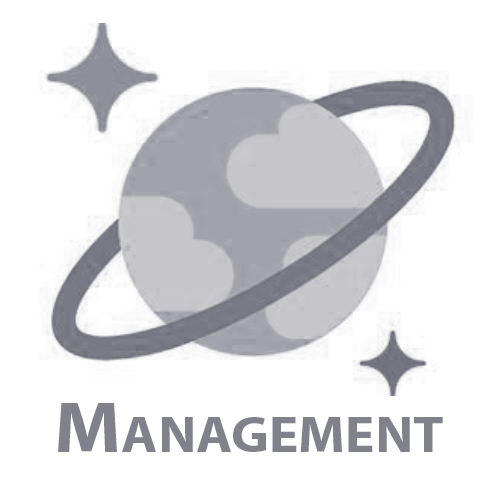
<style>
.page{position:relative;width:500px;height:500px;background:#ffffff}
.page>*{position:absolute;margin:0}
.t1{font:72px "MyriadPro-Bold";color:#81818c;font-variant:small-caps;scale:1.1 1}
</style>
<div class="page">
<p class="t1" style="left:58px;top:403px;width:385px;height:49px">Management</p>
</div>
